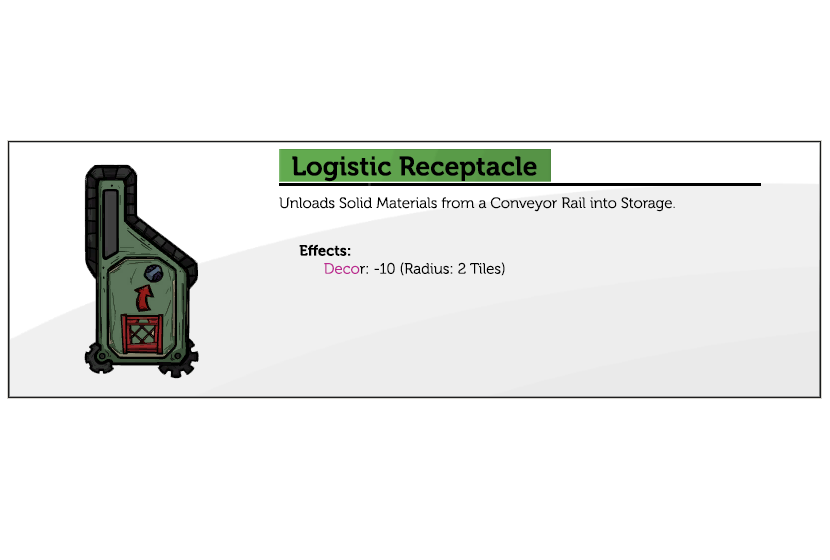
<style>
.page{position:relative;width:830px;height:560px;background:#ffffff}
.page>*{position:absolute;margin:0}
.t1{font:26.7px "Museo-700";color:#000000}
.t2{font:15px "Museo-300";color:#000000}
.t3{font:15px "Museo-700";color:#000000}
.t4{font:15px "Museo-300";color:#bc2991}
</style>
<div class="page">
<p class="t1" style="left:292px;top:156px;width:245px;height:26px">Logistic Receptacle</p>
<p class="t2" style="left:279px;top:197px;width:396px;height:15px">Unloads Solid Materials from a Conveyor Rail into Storage.</p>
<p class="t2" style="left:299px;top:244px;width:206px;height:32px"><span class="t3">Effects:<br>      </span><span class="t4">Deco</span>r: -10 (Radius: 2 Tiles)</p>
</div>
